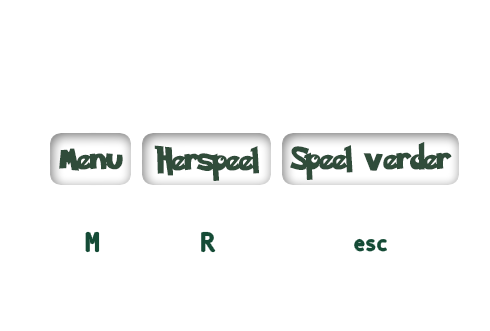
<style>
.page{position:relative;width:490px;height:331px;background:#ffffff}
.page>*{position:absolute;margin:0}
.t1{font:26px "PokemonSolidNormal";color:#304c3a}
.t2{font:26px "AndaleMono";color:#154b36}
.t3{font:19px "AndaleMono";color:#154b36}
</style>
<div class="page">
<p class="t1" style="left:59px;top:148px;width:64px;height:23px">Menu</p>
<p class="t1" style="left:154px;top:145px;width:105px;height:36px">Herspeel</p>
<p class="t1" style="left:290px;top:142px;width:162px;height:38px">Speel verder</p>
<p class="t2" style="left:86px;top:232px;width:13px;height:20px">M</p>
<p class="t2" style="left:202px;top:232px;width:13px;height:20px">R</p>
<p class="t3" style="left:355px;top:239px;width:31px;height:12px">esc</p>
</div>
